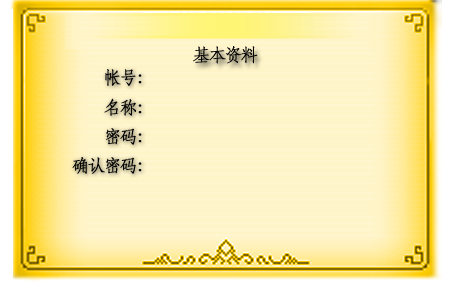
<style>
.page{position:relative;width:449px;height:285px;background:#fff4c7}
.page>*{position:absolute;margin:0}
.t1{font:18px "STFangsong";letter-spacing:-0.14em;color:#010101;font-weight:bold}
.t2{font:18px "STFangsong";letter-spacing:-0.14em;color:#000000;font-weight:bold}
</style>
<div class="page">
<p class="t1" style="left:193px;top:46px;width:65px;height:18px">基本资料</p>
<p class="t2" style="left:105px;top:69px;width:37px;height:17px">帐号：</p>
<p class="t2" style="left:104px;top:98px;width:38px;height:18px">名称：</p>
<p class="t2" style="left:106px;top:128px;width:36px;height:17px">密码：</p>
<p class="t2" style="left:72px;top:157px;width:70px;height:17px">确认密码：</p>
</div>
